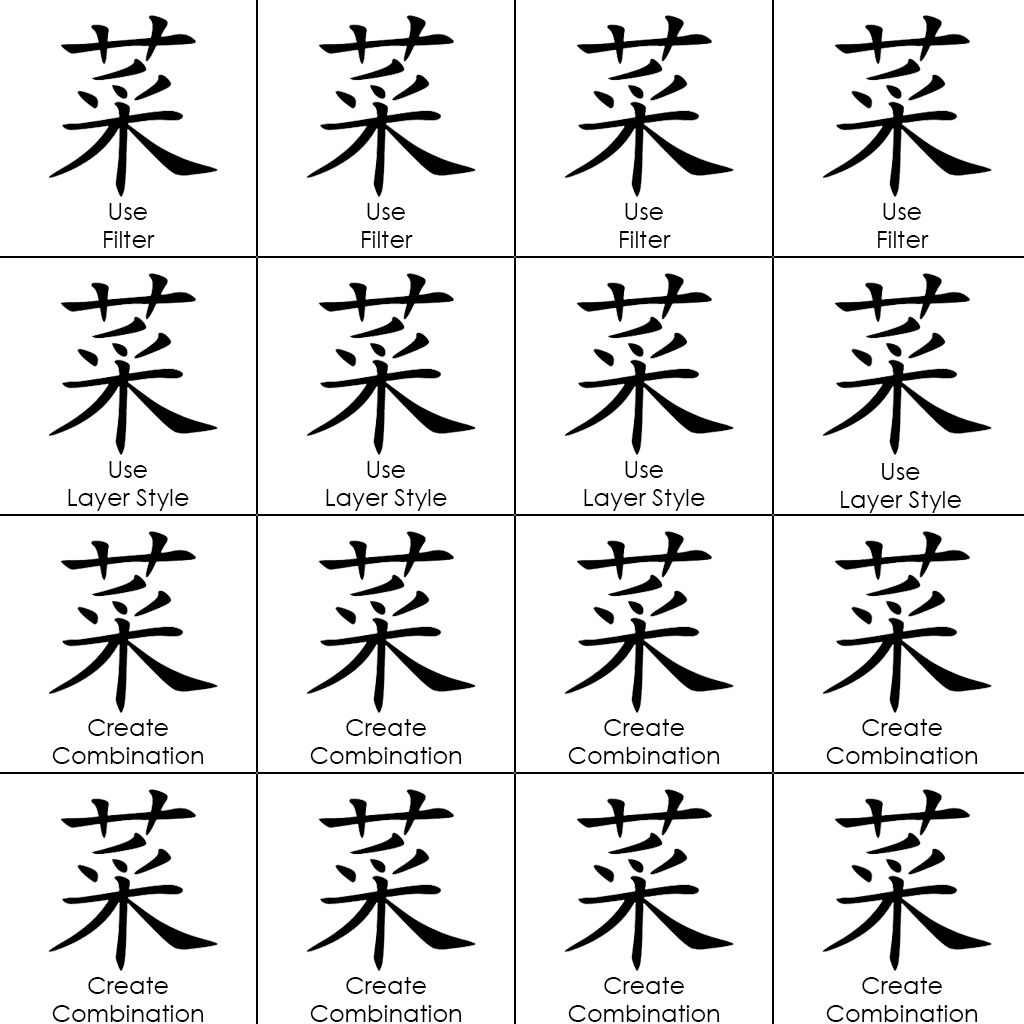
<style>
.page{position:relative;width:1024px;height:1024px;background:#ffffff}
.page>*{position:absolute;margin:0}
.t1{font:24px "CenturyGothic";color:#000000}
</style>
<div class="page">
<p class="t1" style="left:104px;top:203px;width:51px;height:45px;text-align:center">Use <br>Filter</p>
<p class="t1" style="left:362px;top:203px;width:51px;height:45px;text-align:center">Use <br>Filter</p>
<p class="t1" style="left:620px;top:203px;width:51px;height:45px;text-align:center">Use <br>Filter</p>
<p class="t1" style="left:878px;top:203px;width:51px;height:45px;text-align:center">Use <br>Filter</p>
<p class="t1" style="left:68px;top:461px;width:121px;height:50px;text-align:center">Use <br>Layer Style</p>
<p class="t1" style="left:326px;top:461px;width:121px;height:50px;text-align:center">Use <br>Layer Style</p>
<p class="t1" style="left:584px;top:461px;width:121px;height:50px;text-align:center">Use <br>Layer Style</p>
<p class="t1" style="left:841px;top:463px;width:120px;height:50px;text-align:center">Use <br>Layer Style</p>
<p class="t1" style="left:52px;top:719px;width:152px;height:45px;text-align:center">Create<br>Combination</p>
<p class="t1" style="left:310px;top:719px;width:152px;height:45px;text-align:center">Create<br>Combination</p>
<p class="t1" style="left:568px;top:719px;width:152px;height:45px;text-align:center">Create<br>Combination</p>
<p class="t1" style="left:826px;top:719px;width:152px;height:45px;text-align:center">Create<br>Combination</p>
<p class="t1" style="left:52px;top:977px;width:152px;height:45px;text-align:center">Create<br>Combination</p>
<p class="t1" style="left:310px;top:977px;width:152px;height:45px;text-align:center">Create<br>Combination</p>
<p class="t1" style="left:568px;top:977px;width:152px;height:45px;text-align:center">Create<br>Combination</p>
<p class="t1" style="left:826px;top:977px;width:152px;height:45px;text-align:center">Create<br>Combination</p>
</div>
